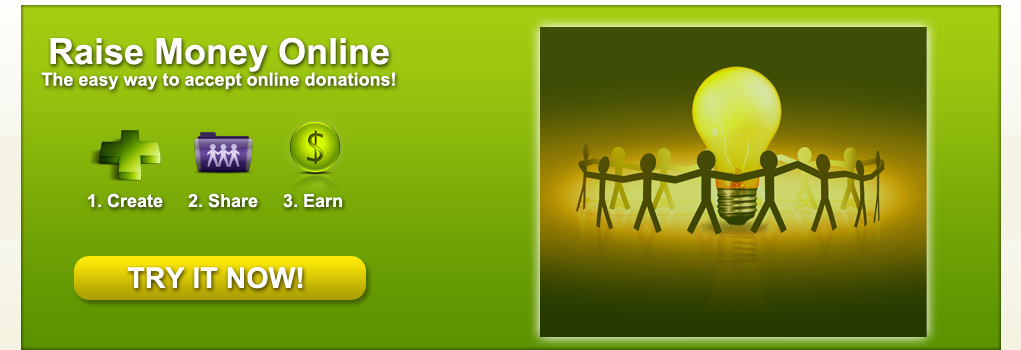
<style>
.page{position:relative;width:1021px;height:350px}
.page>*{position:absolute;margin:0}
.t1{font:18px "Arial-BoldMT";color:#ffffff}
.t2{font:36px "Arial-BoldMT";color:#ffffff}
.t3{font:28.5px "Arial-BoldMT";color:#ffffff}
</style>
<div class="page">
<p class="t1" style="left:41px;top:37px;width:354px;height:53px;text-align:center"><span class="t2">Raise Money Online<br></span>The easy way to accept online donations!</p>
<p class="t1" style="left:88px;top:193px;width:75px;height:15px">1. Create</p>
<p class="t1" style="left:188px;top:193px;width:70px;height:15px">2. Share</p>
<p class="t1" style="left:283px;top:194px;width:59px;height:14px">3. Earn</p>
<p class="t3" style="left:127px;top:267px;width:176px;height:22px">TRY IT NOW!</p>
</div>
